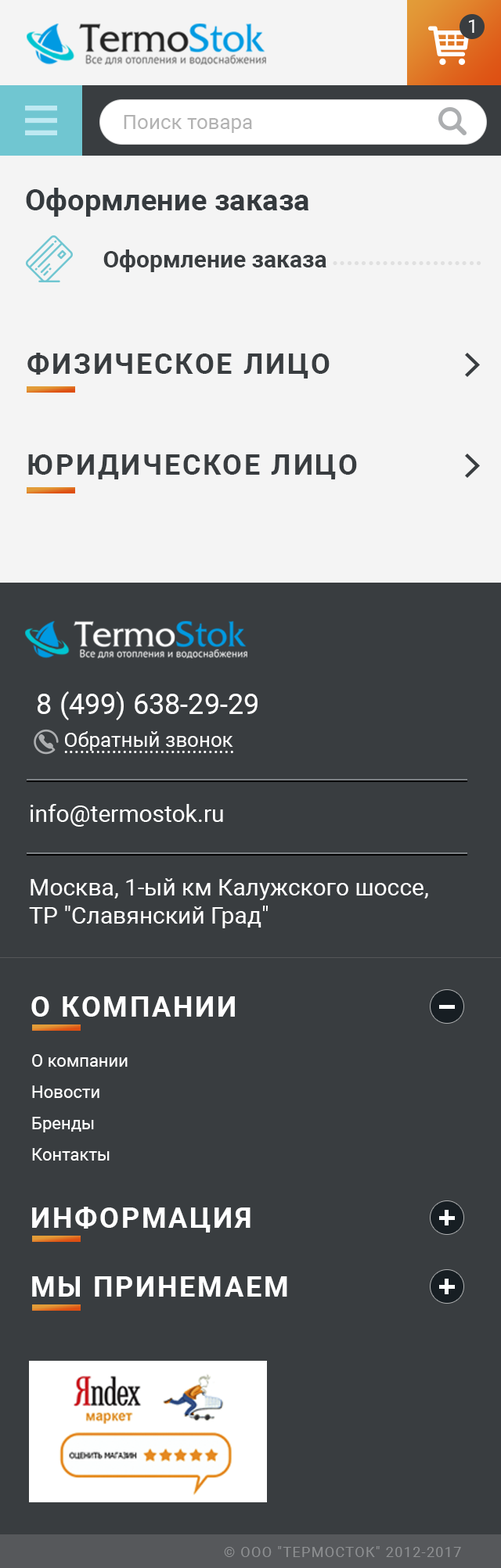
<style>
.page{position:relative;width:501px;height:1568px;background:#393d40}
.page>*{position:absolute;margin:0}
.t1{font:18.8px "Roboto-Regular";color:#ffffff}
.t2{font:20.3px "Roboto-Regular";color:#b2b2b2}
.t3{font:29.7px "Roboto-Bold";color:#353a3e}
.t4{font:23.5px "Roboto-Bold";color:#393d40}
.t5{font:24.7px "Roboto-Bold";color:#e0e0e0}
.t6{font:28.2px "Roboto-Bold";letter-spacing:0.075em;color:#393d40;text-transform:uppercase}
.t7{font:28.2px "Roboto-Regular";color:#ffffff}
.t8{font:20.3px "Roboto-Regular";color:#ffffff}
.t9{font:23.5px "Roboto-Regular";color:#ffffff}
.t10{font:28.2px "Roboto-Bold";letter-spacing:0.075em;color:#ffffff;text-transform:uppercase}
.t11{font:17.2px/31.3px "Roboto-Regular";color:#ffffff}
.t12{font:14.1px "Roboto-Regular";letter-spacing:0.075em;color:#8e9092;text-transform:uppercase}
</style>
<div class="page">
<p class="t1" style="left:468px;top:20px;width:6px;height:13px">1</p>
<p class="t2" style="left:124px;top:115px;width:128px;height:18px">Поиск товара</p>
<p class="t3" style="left:26px;top:188px;width:283px;height:29px">Оформление заказа</p>
<p class="t4" style="left:103px;top:249px;width:223px;height:23px">Оформление заказа</p>
<p class="t5" style="left:332px;top:261px;width:149px;height:4px">.....................</p>
<p class="t6" style="left:27px;top:353px;width:302px;height:26px">физическое лицо</p>
<p class="t6" style="left:28px;top:454px;width:329px;height:25px">юридическое лицо</p>
<p class="t7" style="left:38px;top:691px;width:219px;height:29px">8 (499) 638-29-29</p>
<p class="t8" style="left:65px;top:731px;width:168px;height:20px">Обратный звонок</p>
<p class="t8" style="left:64px;top:751px;width:169px;height:2px">................................</p>
<p class="t9" style="left:30px;top:804px;width:193px;height:23px">info@termostok.ru</p>
<p class="t9" style="left:29px;top:878px;width:399px;height:50px">Москва, 1-ый км Калужского шоссе, <br>ТР "Славянский Град"</p>
<p class="t10" style="left:31px;top:996px;width:204px;height:21px">О КОМПАНИИ</p>
<p class="t11" style="left:32px;top:1054px;width:95px;height:107px">О компании<br>Новости<br>Бренды<br>Контакты</p>
<p class="t10" style="left:32px;top:1207px;width:218px;height:26px">Информация</p>
<p class="t10" style="left:32px;top:1276px;width:255px;height:21px">Мы принемаем</p>
<p class="t12" style="left:224px;top:1546px;width:237px;height:11px">© ООО "Термосток" 2012-2017</p>
</div>
